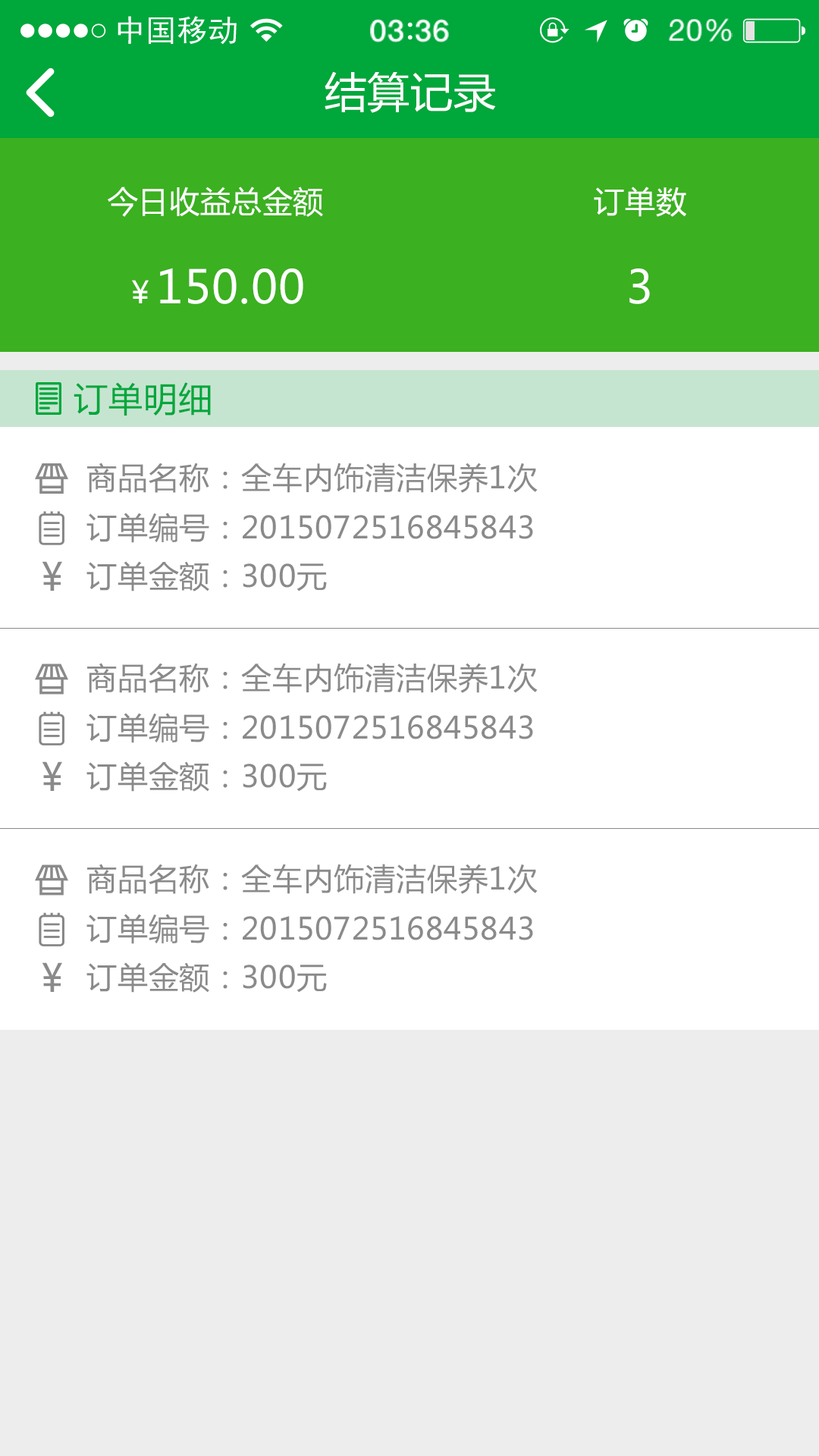
<style>
.page{position:relative;width:819px;height:1456px;background:#ffffff}
.page>*{position:absolute;margin:0}
.t1{font:41.7px "MicrosoftYaHei";letter-spacing:0.02em;color:#ffffff}
.t2{font:30.3px "MicrosoftYaHei";letter-spacing:0.02em;color:#ffffff}
.t3{font:45.5px "MicrosoftYaHei";letter-spacing:0.02em;color:#ffffff}
.t4{font:34.1px "MicrosoftYaHei";letter-spacing:0.02em;color:#00a73b}
.t5{font:30.3px "MicrosoftYaHei";letter-spacing:0.02em;color:#8a8a8a}
.t6{font:38.4px "MicrosoftYaHei";letter-spacing:0.02em;color:#8a8a8a}
.t7{font:38.3px "MicrosoftYaHei";letter-spacing:0.02em;color:#8a8a8a}
</style>
<div class="page">
<p class="t1" style="left:325px;top:71px;width:171px;height:42px">结算记录</p>
<p class="t2" style="left:108px;top:187px;width:215px;height:117px;text-align:center">今日收益总金额<br><br>￥<span class="t3">150.00</span></p>
<p class="t2" style="left:594px;top:187px;width:92px;height:117px;text-align:center">订单数<br><br><span class="t3">3</span></p>
<p class="t4" style="left:74px;top:382px;width:137px;height:34px">订单明细</p>
<p class="t5" style="left:87px;top:463px;width:451px;height:30px">商品名称：全车内饰清洁保养1次</p>
<p class="t5" style="left:86px;top:513px;width:447px;height:30px">订单编号：2015072516845843</p>
<p class="t6" style="left:42px;top:561px;width:20px;height:30px">¥</p>
<p class="t5" style="left:86px;top:561px;width:241px;height:30px">订单金额：300元</p>
<p class="t5" style="left:87px;top:663px;width:451px;height:30px">商品名称：全车内饰清洁保养1次</p>
<p class="t5" style="left:86px;top:713px;width:447px;height:30px">订单编号：2015072516845843</p>
<p class="t7" style="left:42px;top:761px;width:20px;height:30px">¥</p>
<p class="t5" style="left:86px;top:761px;width:241px;height:31px">订单金额：300元</p>
<p class="t5" style="left:87px;top:864px;width:451px;height:30px">商品名称：全车内饰清洁保养1次</p>
<p class="t5" style="left:86px;top:914px;width:447px;height:30px">订单编号：2015072516845843</p>
<p class="t7" style="left:42px;top:962px;width:20px;height:30px">¥</p>
<p class="t5" style="left:86px;top:962px;width:241px;height:31px">订单金额：300元</p>
</div>
